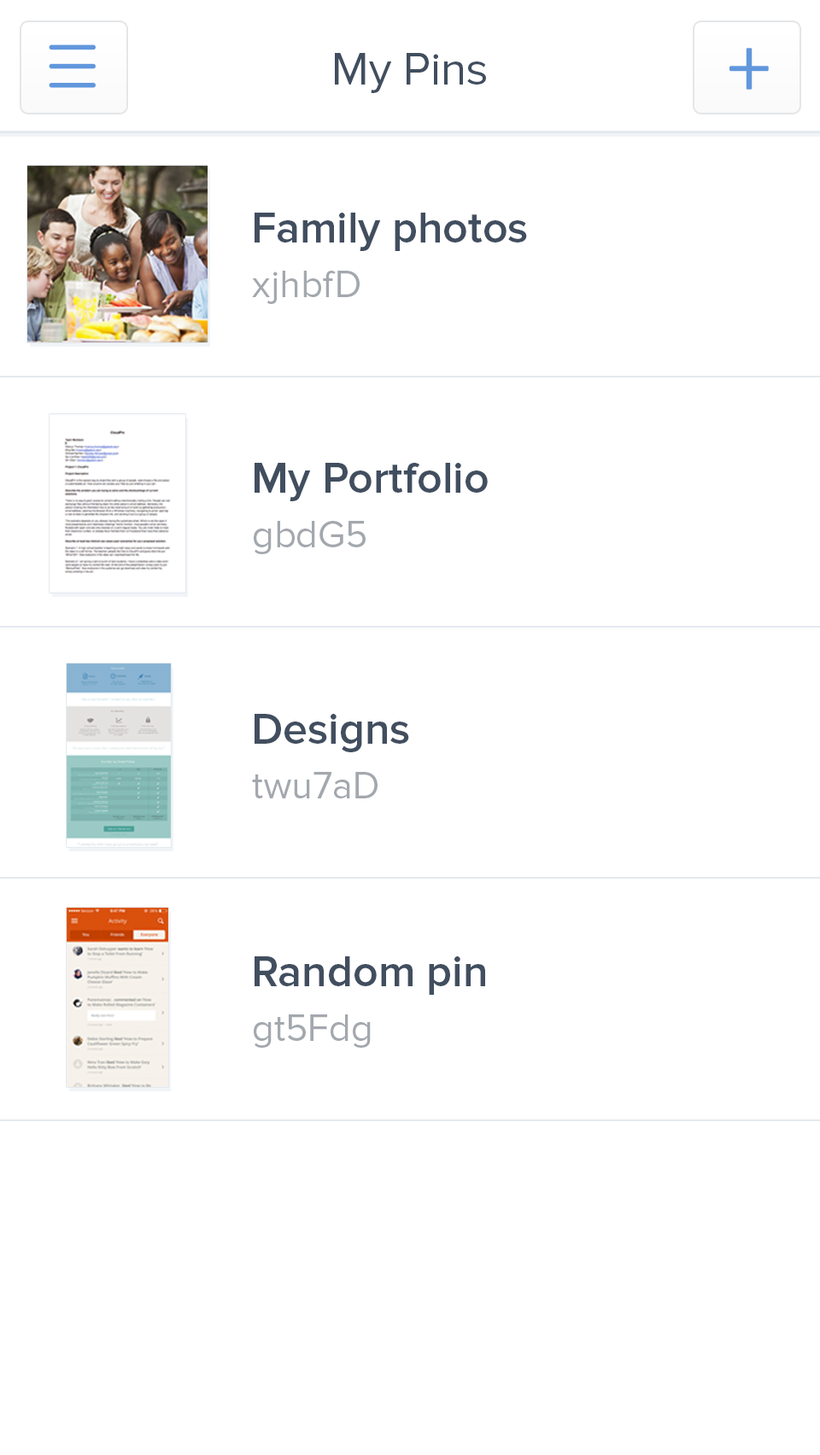
<style>
.page{position:relative;width:820px;height:1455px;background:#ffffff}
.page>*{position:absolute;margin:0}
.t1{font:46.1px "ProximaNova-Regular";color:#414e5f}
.t2{font:85.4px "ProximaNova-Light";letter-spacing:0.09em;color:#6197dd;font-weight:bold}
.t3{font:44.4px "ProximaNova-Semibold";color:#414e5f}
.t4{font:38.4px "ProximaNova-Regular";color:#a3a8ae}
</style>
<div class="page">
<p class="t1" style="left:335px;top:53px;width:151px;height:40px">My Pins</p>
<p class="t2" style="left:729px;top:48px;width:39px;height:42px">+</p>
<p class="t3" style="left:254px;top:213px;width:273px;height:38px">Family photos</p>
<p class="t4" style="left:252px;top:271px;width:107px;height:33px">xjhbfD</p>
<p class="t3" style="left:254px;top:463px;width:234px;height:38px">My Portfolio</p>
<p class="t4" style="left:254px;top:521px;width:111px;height:33px">gbdG5</p>
<p class="t3" style="left:254px;top:714px;width:155px;height:38px">Designs</p>
<p class="t4" style="left:252px;top:772px;width:125px;height:26px">twu7aD</p>
<p class="t3" style="left:254px;top:956px;width:231px;height:39px">Random pin</p>
<p class="t4" style="left:254px;top:1014px;width:117px;height:34px">gt5Fdg</p>
</div>
